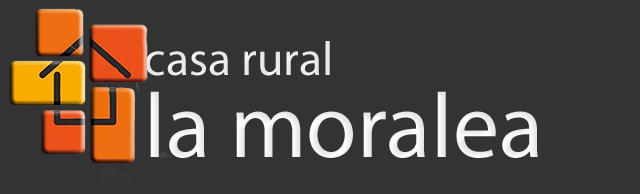
<style>
.page{position:relative;width:640px;height:194px;background:#333333}
.page>*{position:absolute;margin:0}
.t1{font:48px "MyriadPro-Regular";color:#ffffff}
.t2{font:92px "MyriadPro-Regular";color:#ffffff}
</style>
<div class="page">
<p class="t1" style="left:145px;top:41px;width:185px;height:35px">casa rural</p>
<p class="t2" style="left:150px;top:91px;width:388px;height:67px">la moralea</p>
</div>
